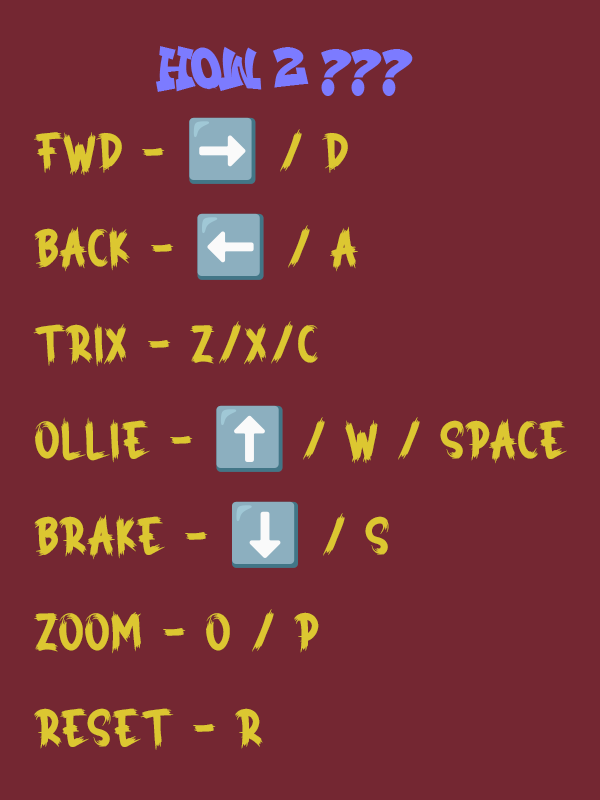
<style>
.page{position:relative;width:600px;height:800px;background:#742732}
.page>*{position:absolute;margin:0}
.t1{font:80px "SpookyScaryRegular"}
.t2{font:60px "NotoColorEmoji-SVG"}
</style>
<div class="page">
<p class="t1" style="left:33px;top:117px;width:534px;height:633px">fwd - <span class="t2">➡️</span> / D<br>Back - <span class="t2">⬅️</span> / A<br>TRIx - z/x/c<br>ollie - <span class="t2">⬆️ </span>/ W / space<br>Brake - <span class="t2">⬇️</span> / S<br>zoom - o / p<br>RESET - R</p>
</div>
